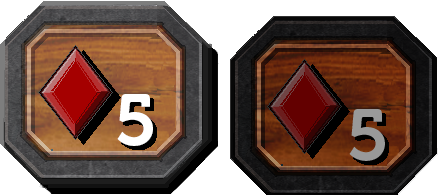
<style>
.page{position:relative;width:443px;height:195px}
.page>*{position:absolute;margin:0}
.t1{font:72px "Museo-700";color:#ffffff}
</style>
<div class="page">
<p class="t1" style="left:117px;top:94px;width:36px;height:52px">5</p>
</div>
